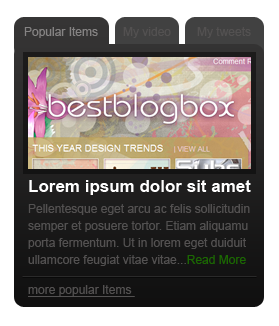
<style>
.page{position:relative;width:279px;height:326px;background:#ffffff}
.page>*{position:absolute;margin:0}
.t1{font:12px "ArialMT";color:#858383}
.t2{font:12px "ArialMT";color:#535151}
.t3{font:17px "Arial-BoldMT";color:#ffffff}
.t4{font:12px/17px "ArialMT";color:#535151}
.t5{font:12px/17px "ArialMT";color:#1b6702}
.t6{font:12px "ArialMT";color:#535151;text-decoration:underline}
</style>
<div class="page">
<p class="t1" style="left:24px;top:27px;width:74px;height:11px">Popular Items</p>
<p class="t2" style="left:123px;top:27px;width:48px;height:11px">My video</p>
<p class="t2" style="left:197px;top:27px;width:54px;height:11px">My tweets</p>
<p class="t3" style="left:29px;top:180px;width:222px;height:15px">Lorem ipsum dolor sit amet</p>
<p class="t4" style="left:28px;top:204px;width:222px;height:62px;text-align:justify">Pellentesque eget arcu ac felis sollicitudin<br>semper et posuere tortor. Etiam aliquamu<br>porta fermentum. Ut in lorem eget duiduit<br>ullamcore feugiat vitae vitae...<span class="t5">Read More</span></p>
<p class="t6" style="left:28px;top:285px;width:107px;height:12px">more popular Items</p>
</div>
